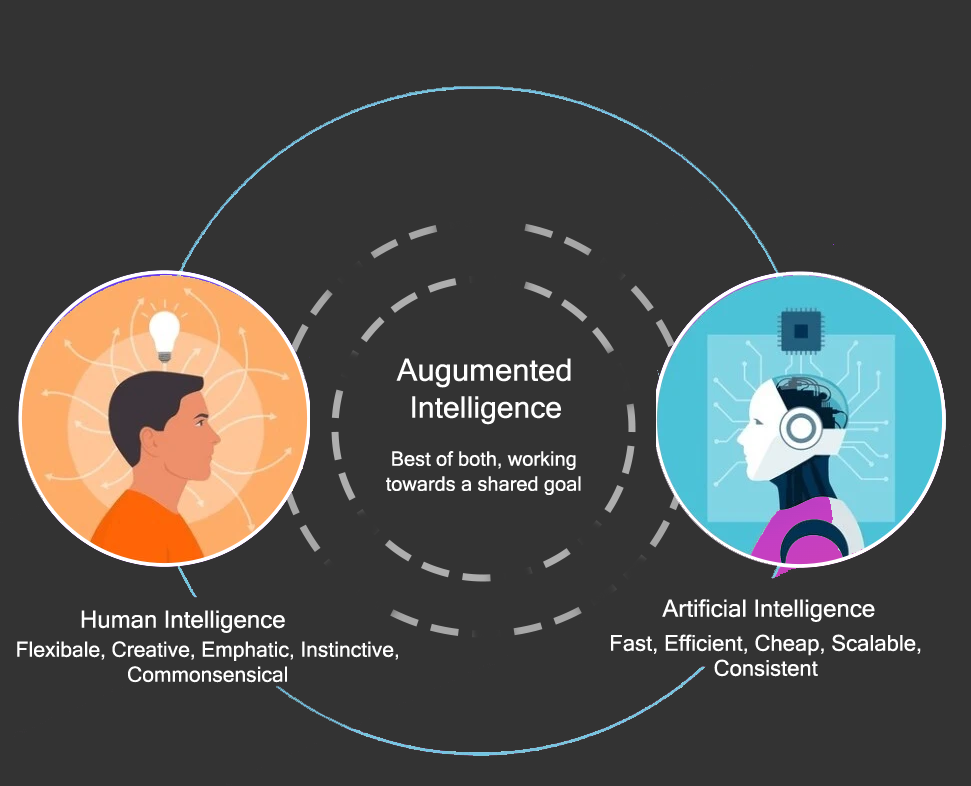
<style>
.page{position:relative;width:971px;height:786px;background:#333333}
.page>*{position:absolute;margin:0}
.t1{font:31px "MicrosoftSansSerif";color:#ffffff}
.t2{font:30px "MicrosoftSansSerif";color:#ffffff}
.t3{font:20px/25px "MicrosoftSansSerif";color:#ffffff}
.t4{font:24px "MicrosoftSansSerif";color:#ffffff}
.t5{font:21px/25px "MicrosoftSansSerif";color:#ffffff}
.t6{font:22px/25px "MicrosoftSansSerif";color:#ffffff}
</style>
<div class="page">
<p class="t1" style="left:396px;top:358px;width:175px;height:30px">Augumented</p>
<p class="t2" style="left:412px;top:396px;width:149px;height:29px">Intelligence</p>
<p class="t3" style="left:386px;top:451px;width:195px;height:44px;text-align:center">Best of both, working<br>towards a shared goal</p>
<p class="t4" style="left:662px;top:599px;width:213px;height:23px">Artificial Intelligence</p>
<p class="t4" style="left:81px;top:610px;width:204px;height:23px">Human Intelligence</p>
<p class="t5" style="left:17px;top:641px;width:381px;height:42px;text-align:center">Flexibale, Creative, Emphatic, Instinctive,<br>Commonsensical</p>
<p class="t6" style="left:611px;top:634px;width:310px;height:43px;text-align:center">Fast, Efficient, Cheap, Scalable,<br>Consistent</p>
</div>
